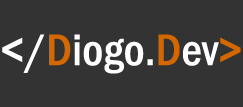
<style>
.page{position:relative;width:243px;height:107px;background:#333333}
.page>*{position:absolute;margin:0}
.t1{font:45.8px "FranklinGothic-MediumCond";color:#ffffff}
.t2{font:45.8px "FranklinGothic-MediumCond";color:#d46700}
</style>
<div class="page">
<p class="t1" style="left:2px;top:34px;width:239px;height:40px">&lt;/<span class="t2">D</span>iogo.<span class="t2">D</span>ev<span class="t2">&gt;</span></p>
</div>
